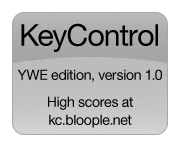
<style>
.page{position:relative;width:180px;height:147px;background:#ffffff}
.page>*{position:absolute;margin:0}
.t1{font:30px "HelveticaNeue";letter-spacing:-0.02em;color:#000000}
.t2{font:14px "HelveticaNeue";letter-spacing:-0.02em;color:#000000}
.t3{font:14px/18px "HelveticaNeue";letter-spacing:-0.02em;color:#000000}
</style>
<div class="page">
<p class="t1" style="left:21px;top:23px;width:137px;height:29px">KeyControl</p>
<p class="t2" style="left:17px;top:69px;width:145px;height:13px">YWE edition, version 1.0</p>
<p class="t3" style="left:48px;top:96px;width:85px;height:32px;text-align:center">High scores at<br>kc.bloople.net</p>
</div>
